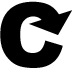
<style>
.page{position:relative;width:72px;height:72px;background:#000000}
.page>*{position:absolute;margin:0}
.t1{font:89.7px "Arial-Black";color:#000000}
</style>
<div class="page">
<p class="t1" style="left:0px;top:1px;width:63px;height:67px">C</p>
</div>
